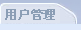
<style>
.page{position:relative;width:81px;height:30px;background:#dee4f0}
.page>*{position:absolute;margin:0}
.t1{font:12px "SimSun";letter-spacing:-0.018em;color:#8b9eb5;font-weight:bold}
</style>
<div class="page">
<p class="t1" style="left:5px;top:9px;width:50px;height:11px">用户管理</p>
</div>
